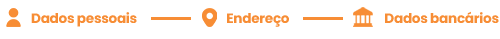
<style>
.page{position:relative;width:500px;height:39px;background:#ffffff}
.page>*{position:absolute;margin:0}
.t1{font:13.6px "Poppins-Bold";letter-spacing:-0.02em;color:#f78d35}
</style>
<div class="page">
<p class="t1" style="left:31px;top:12px;width:106px;height:15px">Dados pessoais</p>
<p class="t1" style="left:227px;top:13px;width:62px;height:14px">Endereço</p>
<p class="t1" style="left:385px;top:11px;width:114px;height:12px">Dados bancários</p>
</div>
